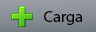
<style>
.page{position:relative;width:96px;height:32px}
.page>*{position:absolute;margin:0}
.t1{font:16px "MyriadPro-Regular";color:#000000}
</style>
<div class="page">
<p class="t1" style="left:44px;top:11px;width:39px;height:14px">Carga</p>
</div>
